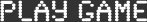
<style>
.page{position:relative;width:147px;height:22px;background:#333333}
.page>*{position:absolute;margin:0}
.t1{font:30px "SynchroLET";color:#ffffff}
</style>
<div class="page">
<p class="t1" style="left:0px;top:0px;width:147px;height:22px">PLAY GAME</p>
</div>
